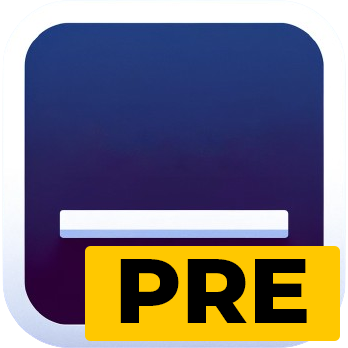
<style>
.page{position:relative;width:348px;height:348px}
.page>*{position:absolute;margin:0}
.t1{font:92px "Montserrat-ExtraBold";color:#000000}
</style>
<div class="page">
<p class="t1" style="left:120px;top:259px;width:187px;height:64px">PRE</p>
</div>
